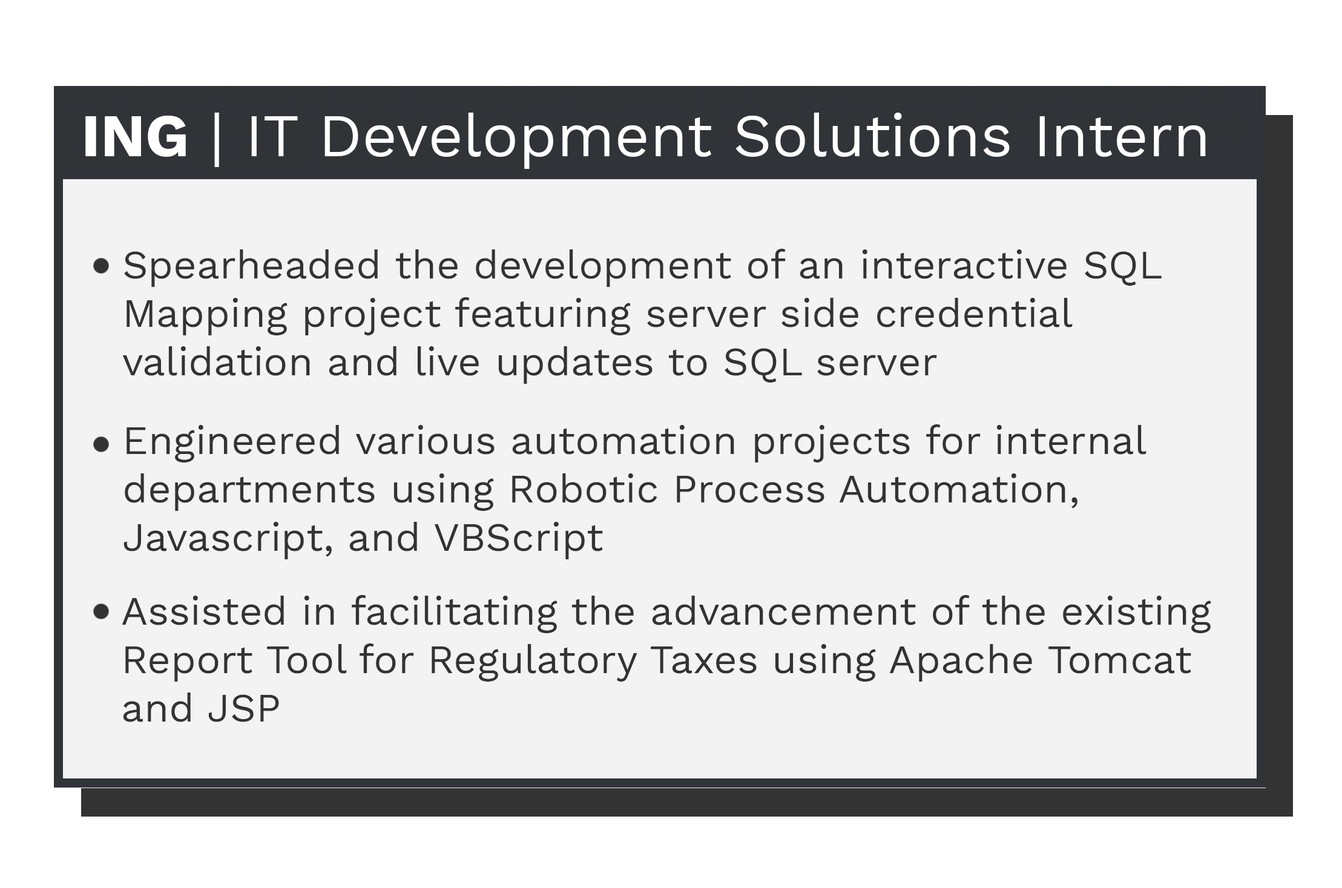
<style>
.page{position:relative;width:1342px;height:888px;background:#f3f3f3}
.page>*{position:absolute;margin:0}
.t1{font:60.6px "WorkSans-Regular";color:#ffffff}
.t2{font:60.6px "WorkSans-Bold";color:#ffffff}
.t3{font:40.4px "WorkSans-Regular";color:#333333}
</style>
<div class="page">
<p class="t1" style="left:85px;top:113px;width:1121px;height:56px"><span class="t2">ING</span> | IT Development Solutions Intern</p>
<p class="t3" style="left:122px;top:249px;width:1040px;height:135px">Spearheaded the development of an interactive SQL <br>Mapping project featuring server side credential<br>validation and live updates to SQL server</p>
<p class="t3" style="left:124px;top:424px;width:1023px;height:135px">Engineered various automation projects for internal <br>departments using Robotic Process Automation, <br>Javascript, and VBScript</p>
<p class="t3" style="left:122px;top:595px;width:1090px;height:127px">Assisted in facilitating the advancement of the existing<br>Report Tool for Regulatory Taxes using Apache Tomcat<br>and JSP</p>
</div>
